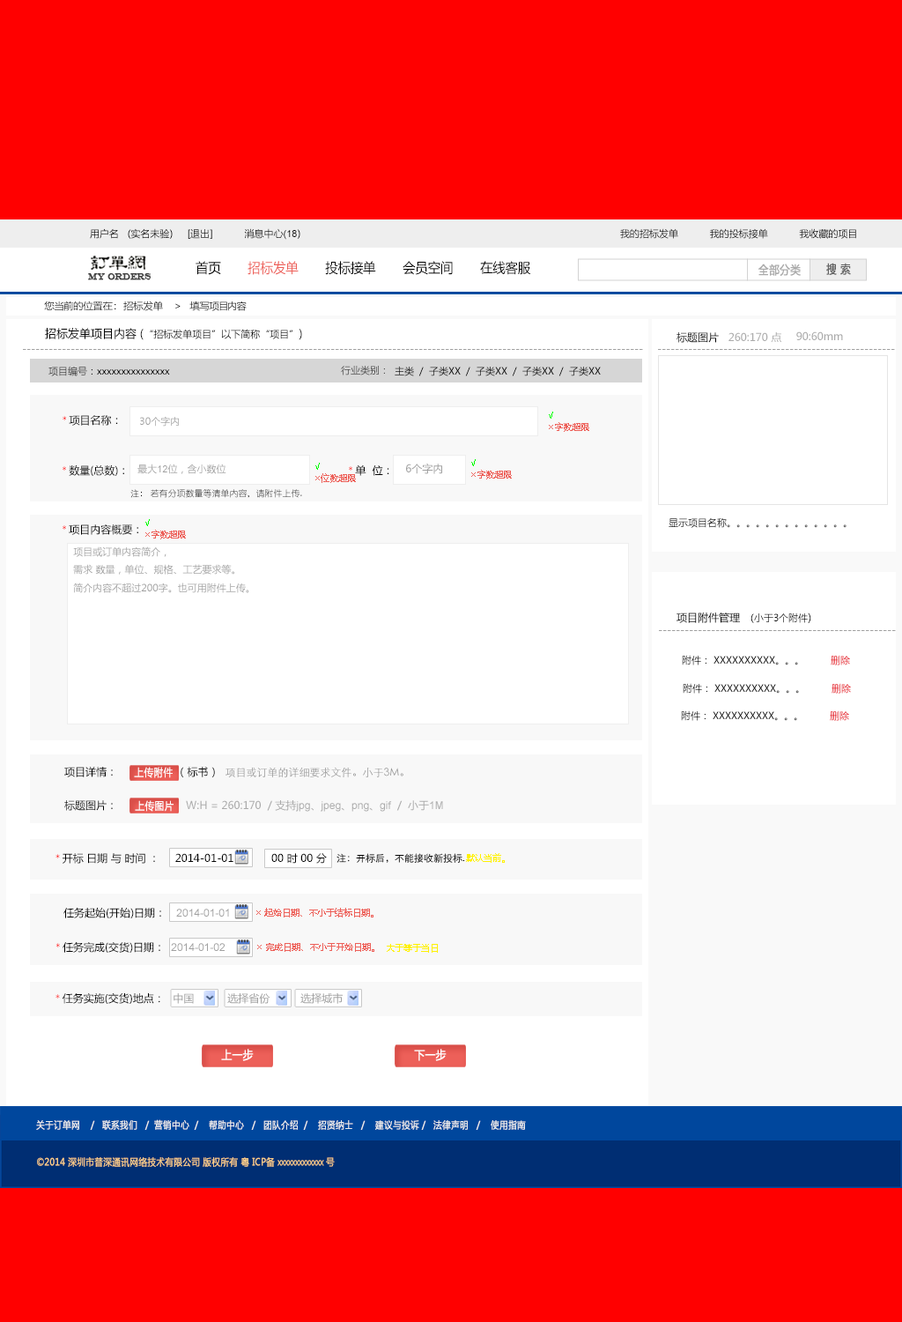
<style>
.page{position:relative;width:902px;height:1322px;background:#ffffff}
.page>*{position:absolute;margin:0}
.t1{font:9.7px "MicrosoftYaHei";color:#000000}
.t2{font:9.7px "ArialMT";color:#000000}
.t3{font:13.6px "MicrosoftYaHei";color:#000000;font-variant:small-caps;scale:0.94 1}
.t4{font:13.6px "MicrosoftYaHei";color:#ed6059;font-variant:small-caps;scale:0.94 1}
.t5{font:11.6px "MicrosoftYaHei";color:#aaaaaa;font-variant:small-caps;font-weight:bold;scale:0.86 1}
.t6{font:11.6px "MicrosoftYaHei";color:#626262;font-variant:small-caps;font-weight:bold;scale:0.86 1}
.t7{font:8.7px "EngraversMT";color:#434343;font-variant:small-caps;font-weight:bold;scale:0.86 1}
.t8{font:9.7px "MicrosoftYaHei";color:#060606;scale:1.04 1}
.t9{font:11.5px "MicrosoftYaHei";color:#000000}
.t10{font:10.6px "MicrosoftYaHei";color:#000000}
.t11{font:10.6px "MicrosoftYaHei";color:#aaaaaa}
.t12{font:10.6px "MicrosoftYaHei";color:#a0a0a0}
.t13{font:9.7px "MicrosoftYaHei";color:#313131}
.t14{font:9.7px "MicrosoftYaHei";color:#434343}
.t15{font:8.8px/11.5px "MicrosoftYaHei";color:#ed6059}
.t16{font:8.8px/11.5px "MicrosoftYaHei";color:#00ff00}
.t17{font:10.1px "STXihei";color:#000000}
.t18{font:10.1px "STXihei";color:#ff0000}
.t19{font:9.7px "MicrosoftYaHei";color:#a0a0a0}
.t20{font:9.7px "ArialMT";color:#a0a0a0}
.t21{font:8.8px "YouYuan";color:#000000}
.t22{font:9.7px "STXihei";color:#000000}
.t23{font:8.8px "STXihei";color:#000000}
.t24{font:9.7px/17.6px "MicrosoftYaHei";color:#a0a0a0}
.t25{font:9.7px/42.3px "MicrosoftYaHei";color:#a0a0a0}
.t26{font:10.6px/17.6px "MicrosoftYaHei";color:#a0a0a0}
.t27{font:10.6px "STXihei";color:#919191}
.t28{font:10.7px "MicrosoftYaHei";color:#ffffff;font-variant:small-caps;font-weight:bold;scale:0.86 1}
.t29{font:10.6px "ArialMT";color:#aaaaaa}
.t30{font:9.7px "STXihei";color:#959595}
.t31{font:9.7px "YouYuan";color:#000000}
.t32{font:8.8px "MicrosoftYaHei";color:#fff100}
.t33{font:10.6px "ArialMT";color:#a0a0a0}
.t34{font:8.8px "MicrosoftYaHei";color:#ed6059}
.t35{font:10.5px "MicrosoftYaHei";color:#000000}
.t36{font:11.6px "MicrosoftYaHei";color:#ffffff;font-variant:small-caps;font-weight:bold;scale:0.86 1}
.t37{font:9.7px "MicrosoftYaHei";color:#eeeeee;font-variant:small-caps;font-weight:bold;scale:0.86 1}
.t38{font:13.6px "STXihei";color:#eeeeee;font-variant:small-caps;font-weight:bold;scale:0.86 1}
.t39{font:9.7px "MicrosoftYaHei";color:#facd89;font-variant:small-caps;font-weight:bold;scale:0.87 1}
.t40{font:9.7px "MicrosoftYaHei";color:#eeeeee;font-variant:small-caps;font-weight:bold;scale:0.87 1}
</style>
<div class="page">
<p class="t1" style="left:90px;top:228px;width:210px;height:12px">用户名   (实名未验)     [退出]           消息中心<span class="t2">(18</span>)</p>
<p class="t1" style="left:620px;top:228px;width:236px;height:11px">我的招标发单           我的投标接单           我收藏的项目</p>
<p class="t3" style="left:196px;top:261px;width:335px;height:14px">首页      <span class="t4"> 招标发单</span>       投标接单       会员空间       在线客服</p>
<p class="t5" style="left:759px;top:263px;width:42px;height:13px">全部分类</p>
<p class="t6" style="left:826px;top:263px;width:25px;height:12px">搜 索</p>
<p class="t7" style="left:88px;top:273px;width:64px;height:7px">MY ORDERS</p>
<p class="t8" style="left:44px;top:300px;width:203px;height:11px">您当前的位置在：  招标发单    &gt;   填写项目内容</p>
<p class="t1" style="left:45px;top:328px;width:257px;height:12px"><span class="t9">招标发单项目内容 (</span>“招标发单项目”以下简称“项目”<span class="t9">)</span></p>
<p class="t10" style="left:677px;top:332px;width:42px;height:11px">标题图片</p>
<p class="t11" style="left:729px;top:332px;width:53px;height:11px">260:170 点</p>
<p class="t11" style="left:797px;top:331px;width:46px;height:9px">90:60mm</p>
<p class="t12" style="left:23px;top:349px;width:620px;height:1px">---------------------------------------------------------------------------------------------------------------------------------------------</p>
<p class="t12" style="left:658px;top:349px;width:237px;height:1px">------------------------------------------------------</p>
<p class="t2" style="left:48px;top:366px;width:122px;height:10px"><span class="t13">项目编号</span><span class="t1">：</span>xxxxxxxxxxxxxxx</p>
<p class="t14" style="left:341px;top:366px;width:44px;height:9px">行业类别：</p>
<p class="t1" style="left:395px;top:366px;width:206px;height:10px">主类  /  子类XX  /  子类XX  /  子类XX  /  子类XX</p>
<p class="t15" style="left:549px;top:411px;width:40px;height:21px"><span class="t16">√<br></span>×字数超限</p>
<p class="t10" style="left:63px;top:415px;width:55px;height:11px"><span class="t17">                    <br><br>                  </span><span class="t18">* </span>项目名称：</p>
<p class="t19" style="left:140px;top:416px;width:39px;height:10px">30个字内</p>
<p class="t15" style="left:471px;top:459px;width:41px;height:20px"><span class="t16">√<br></span>×字数超限</p>
<p class="t10" style="left:63px;top:465px;width:61px;height:11px"><span class="t17">                    <br><br>                    </span><span class="t17">* </span>数量(总数)：</p>
<p class="t19" style="left:137px;top:463px;width:89px;height:11px">最大<span class="t20">12</span>位，含小数位</p>
<p class="t15" style="left:315px;top:463px;width:41px;height:20px"><span class="t16">√<br></span>×位数超限</p>
<p class="t10" style="left:349px;top:464px;width:40px;height:12px"><span class="t17">                    <br><br>                      </span><span class="t18">* </span>单  位：</p>
<p class="t12" style="left:406px;top:463px;width:36px;height:11px">6个字内</p>
<p class="t21" style="left:130px;top:489px;width:172px;height:9px"><span class="t22">                    <br><br>                    </span><span class="t23">注： </span>若有分项数量等清单内容，请附件上传.</p>
<p class="t15" style="left:145px;top:519px;width:41px;height:20px"><span class="t16">√<br></span>×字数超限</p>
<p class="t1" style="left:669px;top:517px;width:178px;height:11px">显示项目名称。。。。。。。。。。。。。</p>
<p class="t10" style="left:63px;top:524px;width:75px;height:11px"><span class="t17">                    <br><br>                    </span><span class="t18">* </span>项目内容概要：</p>
<p class="t24" style="left:73px;top:546px;width:176px;height:47px">项目或订单内容简介，<br>需求 数量，单位、规格、工艺要求等。<br><span class="t25">简介内容不超过200字。</span>也可用附件上传<span class="t26">。</span></p>
<p class="t1" style="left:677px;top:612px;width:134px;height:11px"><span class="t10">项目附件管理   </span>(小于3个附件<span class="t10">)</span></p>
<p class="t12" style="left:659px;top:630px;width:237px;height:1px">------------------------------------------------------</p>
<p class="t1" style="left:682px;top:655px;width:168px;height:10px">附件： XXXXXXXXXX。。。          删除</p>
<p class="t1" style="left:683px;top:683px;width:168px;height:10px">附件： XXXXXXXXXX。。。          删除</p>
<p class="t1" style="left:681px;top:710px;width:168px;height:11px">附件： XXXXXXXXXX。。。          删除</p>
<p class="t10" style="left:64px;top:767px;width:340px;height:10px">项目详情：                   （标书）  <span class="t27">项目或订单的详细要求文件。小于3M。</span></p>
<p class="t28" style="left:134px;top:767px;width:39px;height:11px">上传附件</p>
<p class="t11" style="left:64px;top:800px;width:379px;height:11px"><span class="t10">标题图片：                      </span>W:H = 260:170  / 支持<span class="t29">jpg</span>、<span class="t29">jpeg</span>、<span class="t29">png</span>、<span class="t29">gif</span>  /  小于<span class="t29">1M</span></p>
<p class="t28" style="left:135px;top:800px;width:39px;height:11px">上传图片</p>
<p class="t10" style="left:56px;top:852px;width:271px;height:11px"><span class="t18">* </span>开标 日期 与 时间 ：     2014-01-01            00 时 00 分</p>
<p class="t22" style="left:337px;top:853px;width:128px;height:10px"><span class="t30">                    <br><br>                   </span> 注：开标后，不能接收新投标<span class="t31">.</span></p>
<p class="t32" style="left:466px;top:853px;width:39px;height:10px">默认当前。</p>
<p class="t10" style="left:63px;top:907px;width:98px;height:11px">任务起始(开始)日期：</p>
<p class="t33" style="left:176px;top:908px;width:53px;height:8px">2014-01-01</p>
<p class="t34" style="left:256px;top:908px;width:118px;height:9px">× 起始日期、不小于结标日期。</p>
<p class="t10" style="left:56px;top:941px;width:169px;height:11px"><span class="t18">* </span>任务完成(交货)日期：  <span class="t33">2014-01-02</span></p>
<p class="t34" style="left:257px;top:943px;width:117px;height:9px">× 完成日期、不小于开始日期。</p>
<p class="t32" style="left:387px;top:944px;width:51px;height:8px">大于等于当日</p>
<p class="t35" style="left:56px;top:993px;width:104px;height:11px"><span class="t17">* </span>任务实施(交货)地点：</p>
<p class="t12" style="left:174px;top:993px;width:20px;height:11px">中国</p>
<p class="t12" style="left:227px;top:993px;width:43px;height:11px">选择省份</p>
<p class="t12" style="left:300px;top:992px;width:43px;height:12px">选择城市</p>
<p class="t36" style="left:221px;top:1048px;width:33px;height:13px">上一步</p>
<p class="t36" style="left:414px;top:1048px;width:33px;height:13px">下一步</p>
<p class="t37" style="left:36px;top:1119px;width:490px;height:11px"><span class="t38"><br><br></span>关于订单网    /   联系我们   /  营销中心  /    帮助中心   /   团队介绍  /    招贤纳士   /    建议与投诉 /   法律声明   /    使用指南</p>
<p class="t39" style="left:37px;top:1157px;width:298px;height:10px"><span class="t40"> </span>©2014 深圳市普深通讯网络技术有限公司 版权所有 粤 ICP备 xxxxxxxxxxxxx 号</p>
</div>
